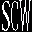
<style>
.page{position:relative;width:32px;height:32px;background:#030303}
.page>*{position:absolute;margin:0}
.t1{font:39.3px "TrajanPro-Regular";color:#fdfdfd;scale:0.52 1}
.t2{font:39.3px "TrajanPro-Regular";color:#fcfdfd;scale:0.28 1}
.t3{font:39.8px "TrajanPro-Regular";color:#fafcfd;scale:0.28 1}
</style>
<div class="page">
<p class="t1" style="left:2px;top:1px;width:8px;height:30px">S</p>
<p class="t2" style="left:11px;top:1px;width:7px;height:30px">C</p>
<p class="t3" style="left:19px;top:0px;width:12px;height:31px">W</p>
</div>
